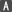
<style>
.page{position:relative;width:12px;height:12px;background:#4a4a4a}
.page>*{position:absolute;margin:0}
.t1{font:11px "LCGothic";color:#ffffff}
</style>
<div class="page">
<p class="t1" style="left:3px;top:1px;width:6px;height:10px">A</p>
</div>
